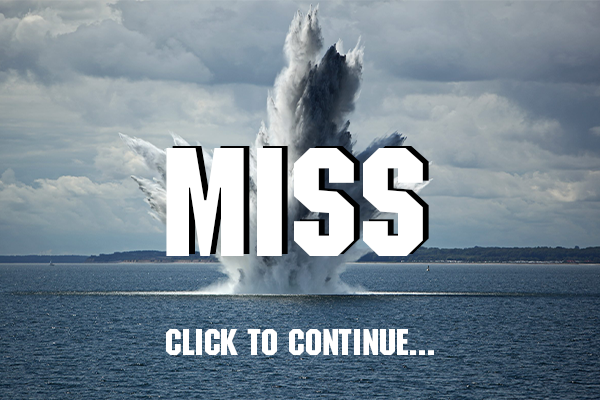
<style>
.page{position:relative;width:600px;height:400px}
.page>*{position:absolute;margin:0}
.t1{font:150px "MachineStd";color:#ffffff}
.t2{font:36px "MachineStd";color:#ffffff}
</style>
<div class="page">
<p class="t1" style="left:166px;top:148px;width:257px;height:108px">Miss</p>
<p class="t2" style="left:166px;top:329px;width:268px;height:26px">Click to continue...</p>
</div>
